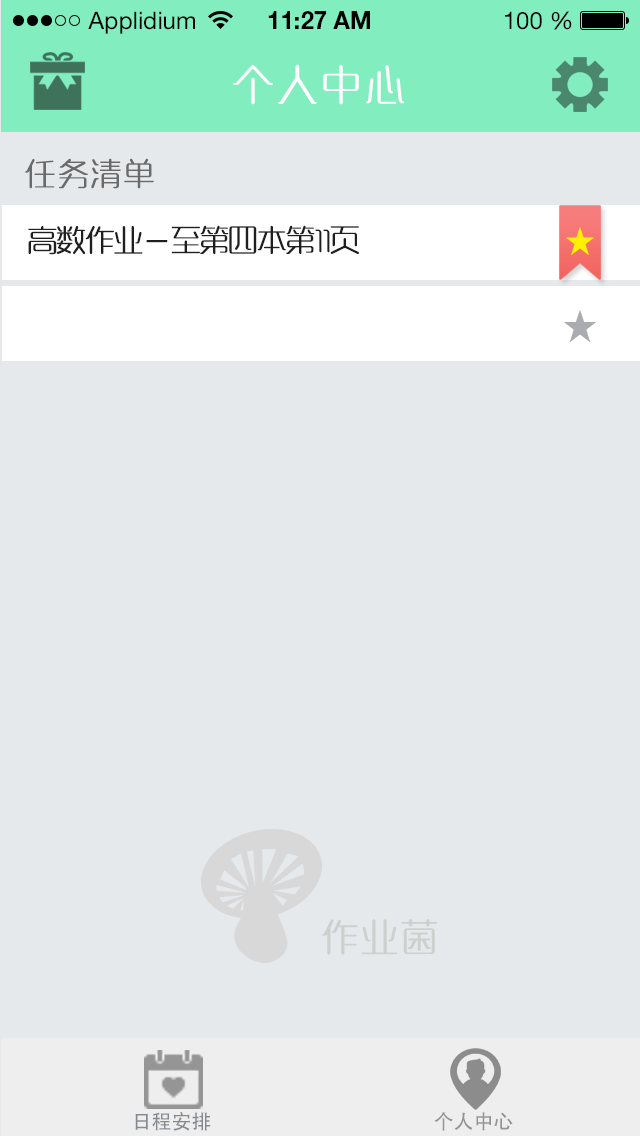
<style>
.page{position:relative;width:640px;height:1136px;background:#e6e9ec}
.page>*{position:absolute;margin:0}
.t1{font:24px "HelveticaNeueLTStd-Roman";color:#000000}
.t2{font:24px "HelveticaNeueLTStd-Bd";color:#000000}
.t3{font:40px "MFYaYuan_Noncommercial-Regular";letter-spacing:0.1em;color:#fefefe}
.t4{font:30px "MFYaYuan_Noncommercial-Regular";letter-spacing:0.1em;color:#6a6a6a}
.t5{font:28.7px "MFYaYuan_Noncommercial-Regular";color:#1f1f1f}
.t6{font:28.7px "AdobeHeitiStd-Regular";color:#1f1f1f}
.t7{font:36px "MFYaYuan_Noncommercial-Regular";letter-spacing:0.1em;color:#bec5bf}
.t8{font:20px "AdobeHeitiStd-Regular";color:#84898f}
.t9{font:20px "AdobeHeitiStd-Regular";color:#939393}
</style>
<div class="page">
<p class="t1" style="left:88px;top:11px;width:107px;height:23px">Applidium</p>
<p class="t2" style="left:268px;top:11px;width:102px;height:18px">11:27 AM</p>
<p class="t1" style="left:505px;top:11px;width:67px;height:19px">100 %</p>
<p class="t3" style="left:233px;top:64px;width:171px;height:41px">个人中心</p>
<p class="t4" style="left:25px;top:158px;width:129px;height:31px">任务清单</p>
<p class="t5" style="left:28px;top:225px;width:331px;height:30px">高数作业<span class="t6">－</span>至第四本第11页</p>
<p class="t7" style="left:322px;top:919px;width:115px;height:36px;opacity:0.67">作业菌</p>
<p class="t8" style="left:135px;top:1112px;width:76px;height:19px">日程安排</p>
<p class="t9" style="left:434px;top:1112px;width:79px;height:19px">个人中心</p>
</div>
